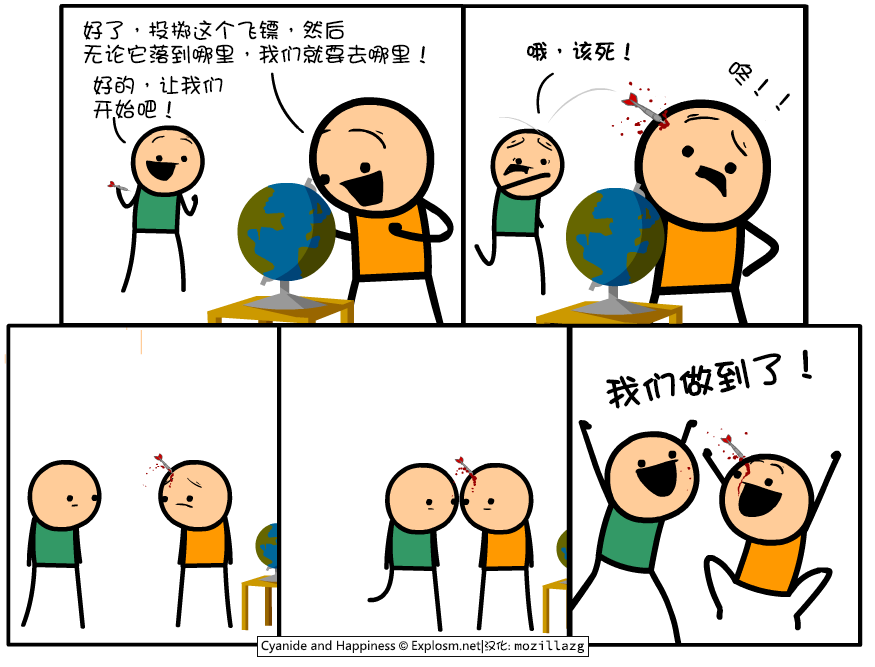
<style>
.page{position:relative;width:875px;height:667px;background:#ffffff}
.page>*{position:absolute;margin:0}
.t1{font:22px/24px "DFGirl";color:#000000}
.t2{font:22px "DFGirl";color:#000000;font-weight:bold}
.t3{font:26px "DFGirl";color:#000000}
.t4{font:36px "DFGirl";color:#000000;font-weight:bold}
</style>
<div class="page">
<p class="t1" style="left:83px;top:20px;width:343px;height:45px">好了，投掷这个飞镖，然后<br>无论它落到哪里，我们就要去哪里！</p>
<p class="t2" style="left:527px;top:41px;width:103px;height:20px">哦，该死！</p>
<p class="t3" style="left:728px;top:62px;width:62px;height:49px;rotate:34deg">咚！！</p>
<p class="t1" style="left:93px;top:75px;width:130px;height:44px">好的，让我们<br>开始吧！</p>
<p class="t4" style="left:606px;top:349px;width:206px;height:60px;rotate:-9deg">我们做到了！</p>
</div>
